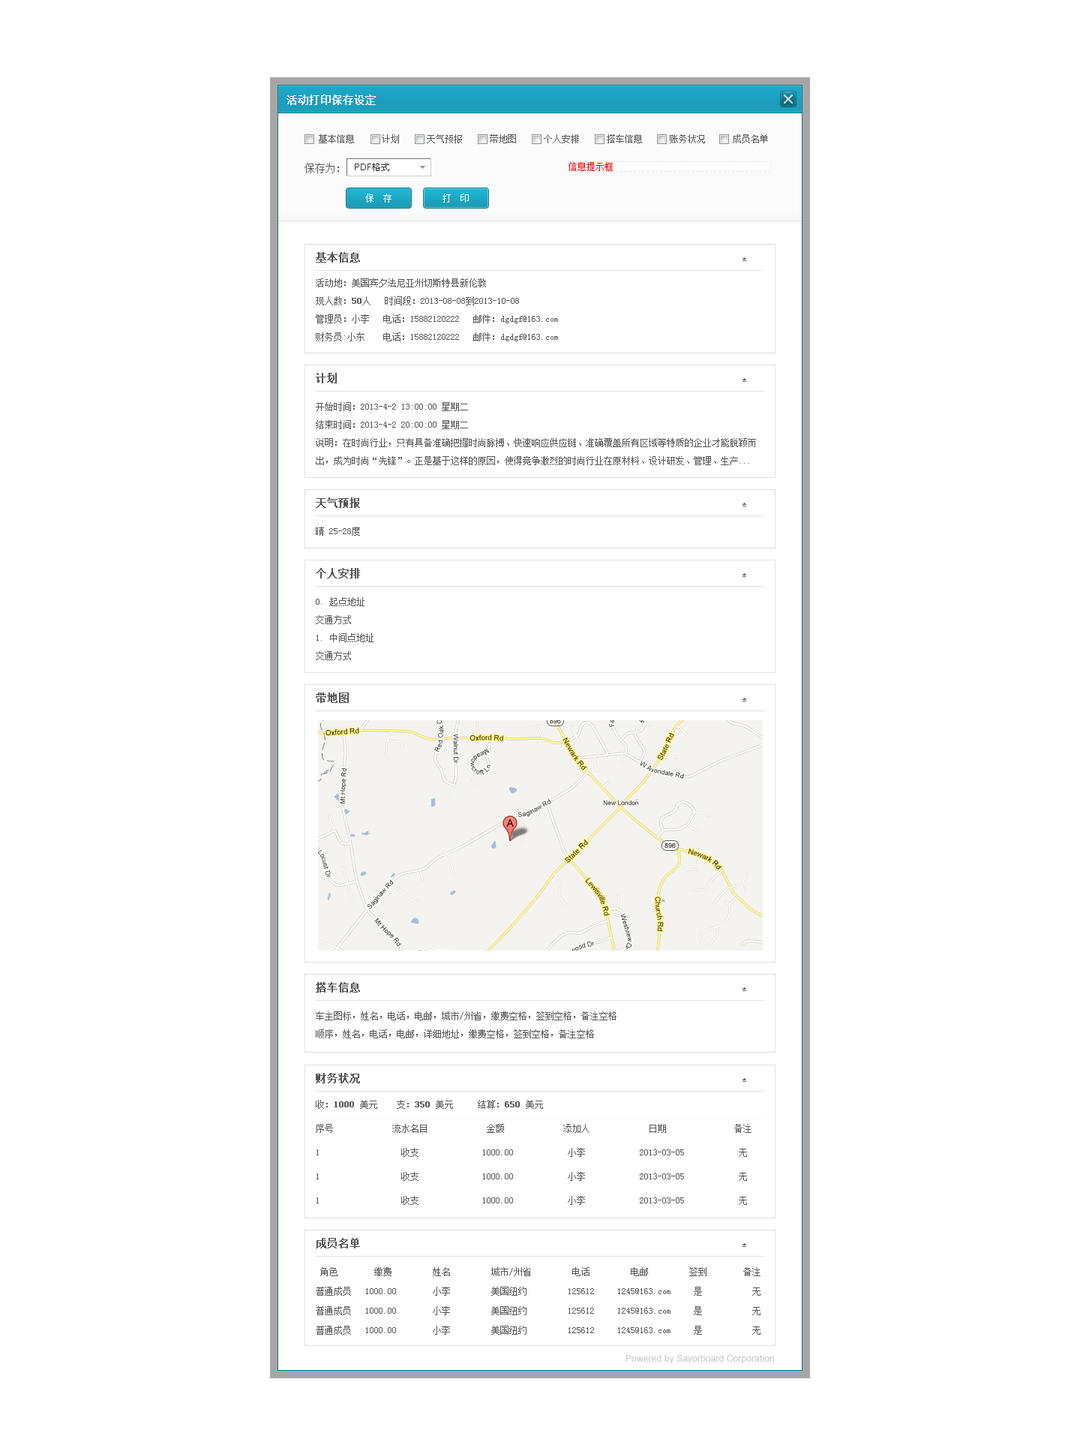
<style>
.page{position:relative;width:1080px;height:1442px;background:#ffffff}
.page>*{position:absolute;margin:0}
.t1{font:10.5px "SimSun";color:#eef7fe;font-weight:bold}
.t2{font:9px "SimSun";color:#555555}
.t3{font:10.5px "SimSun";color:#555555}
.t4{font:9px "SimSun";color:#ffffff}
.t5{font:10.5px "SimSun";color:#555555;font-weight:bold}
.t6{font:9px/18px "SimSun";color:#555555}
.t7{font:9px/18px "SimSun";color:#555555;font-weight:bold}
.t8{font:9px/24px "SimSun";color:#555555}
.t9{font:9px/24px "SimSun";color:#555555;font-weight:bold}
.t10{font:9px/19.5px "SimSun";color:#555555}
.t11{font:9px "ArialMT";letter-spacing:0.01em;color:#cccccc}
</style>
<div class="page">
<p class="t1" style="left:286px;top:94px;width:90px;height:11px">活动打印保存设定</p>
<p class="t2" style="left:319px;top:134px;width:449px;height:9px">基本信息      计划      天气预报      带地图      个人安排      搭车信息      账务状况      成员名单</p>
<p class="t3" style="left:304px;top:163px;width:35px;height:10px">保存为:</p>
<p class="t4" style="left:365px;top:194px;width:27px;height:8px">保  存</p>
<p class="t4" style="left:442px;top:194px;width:27px;height:8px">打  印</p>
<p class="t5" style="left:316px;top:252px;width:44px;height:10px">基本信息</p>
<p class="t6" style="left:316px;top:278px;width:242px;height:63px">活动地：美国宾夕法尼亚州切斯特县新伦敦<br>现人数：<span class="t7">50</span>人   时间段：2013-08-08到2013-10-08<br>管理员：小李   电话：15882120222   邮件：dgdgf@163.com<br>财务员:小东    电话：15882120222   邮件：dgdgf@163.com</p>
<p class="t5" style="left:316px;top:373px;width:21px;height:10px">计划</p>
<p class="t6" style="left:316px;top:402px;width:440px;height:63px">开始时间：2013-4-2 13:00:00 星期二<br>结束时间：2013-4-2 20:00:00 星期二<br>说明：在时尚行业，只有具备准确把握时尚脉搏、快速响应供应链、准确覆盖所有区域等特质的企业才能脱颖而<br>出，成为时尚“先锋”。正是基于这样的原因，使得竞争激烈的时尚行业在原材料、设计研发、管理、生产...</p>
<p class="t5" style="left:316px;top:497px;width:44px;height:11px">天气预报</p>
<p class="t2" style="left:316px;top:526px;width:44px;height:10px">晴 25-28度</p>
<p class="t5" style="left:316px;top:568px;width:44px;height:10px">个人安排</p>
<p class="t6" style="left:316px;top:597px;width:58px;height:63px">0. 起点地址<br>交通方式<br>1. 中间点地址<br>交通方式</p>
<p class="t5" style="left:316px;top:692px;width:33px;height:11px">带地图</p>
<p class="t5" style="left:316px;top:982px;width:44px;height:10px">搭车信息</p>
<p class="t6" style="left:316px;top:1011px;width:300px;height:27px">车主图标，姓名，电话，电邮，城市/州省，缴费空格，签到空格，备注空格<br>顺序，姓名，电话，电邮，详细地址，缴费空格，签到空格，备注空格</p>
<p class="t5" style="left:316px;top:1072px;width:44px;height:11px">财务状况</p>
<p class="t8" style="left:316px;top:1100px;width:436px;height:104px">收：<span class="t9">1000 </span>美元 支：<span class="t9">350 </span>美元 结算：<span class="t9">650 </span>美元<br>序号             流水名目             金额             添加人             日期               备注<br>1                  收支              1000.00            小李            2013-03-05            无<br>1                  收支              1000.00            小李            2013-03-05            无<br>1                  收支              1000.00            小李            2013-03-05            无</p>
<p class="t5" style="left:316px;top:1238px;width:44px;height:10px">成员名单</p>
<p class="t10" style="left:316px;top:1267px;width:444px;height:67px">角色        缴费         姓名         城市/州省         电话         电邮         签到        备注 <br>普通成员   1000.00        小李         美国纽约         125612     1245@163.com     是           无<br>普通成员   1000.00        小李         美国纽约         125612     1245@163.com     是           无<br>普通成员   1000.00        小李         美国纽约         125612     1245@163.com     是           无</p>
<p class="t11" style="left:626px;top:1354px;width:148px;height:9px">Powered by Savorboard Corporation</p>
</div>
